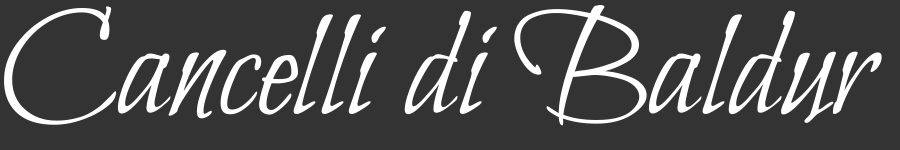
<style>
.page{position:relative;width:900px;height:150px;background:#333333}
.page>*{position:absolute;margin:0}
.t1{font:156px "BilboSwashCaps-Regular";color:#ffffff}
</style>
<div class="page">
<p class="t1" style="left:4px;top:5px;width:878px;height:121px">Cancelli di Baldur</p>
</div>
